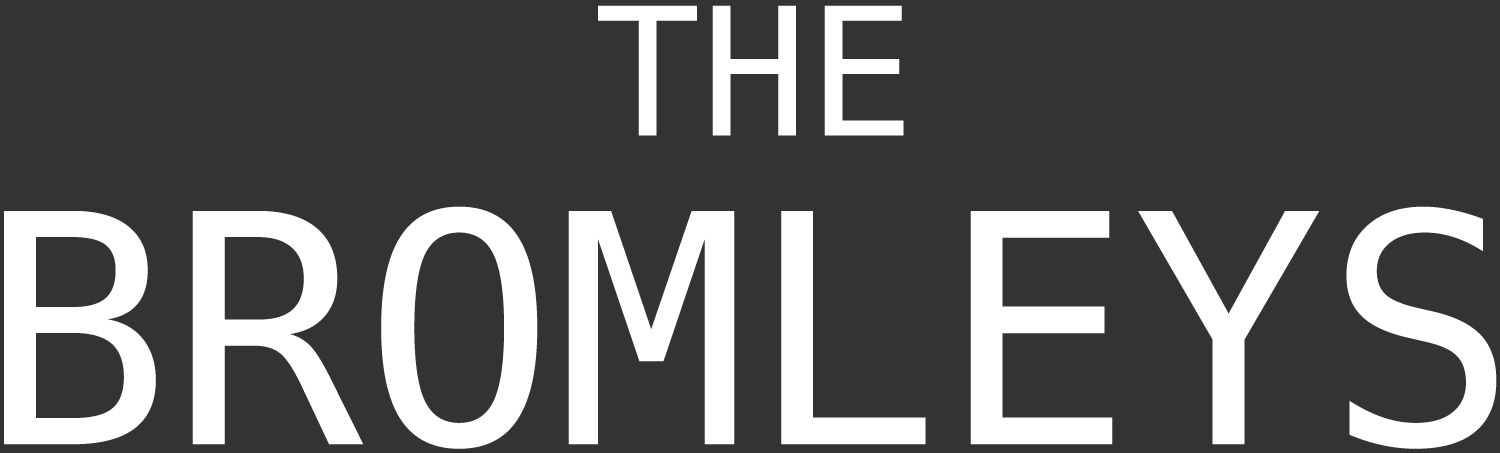
<style>
.page{position:relative;width:1500px;height:453px;background:#333333}
.page>*{position:absolute;margin:0}
.t1{font:177.6px "DejaVuSansMono";color:#ffffff}
.t2{font:319.8px "DejaVuSansMono";color:#ffffff}
</style>
<div class="page">
<p class="t1" style="left:598px;top:5px;width:306px;height:131px">THE</p>
<p class="t2" style="left:4px;top:206px;width:1493px;height:243px">BROMLEYS</p>
</div>
